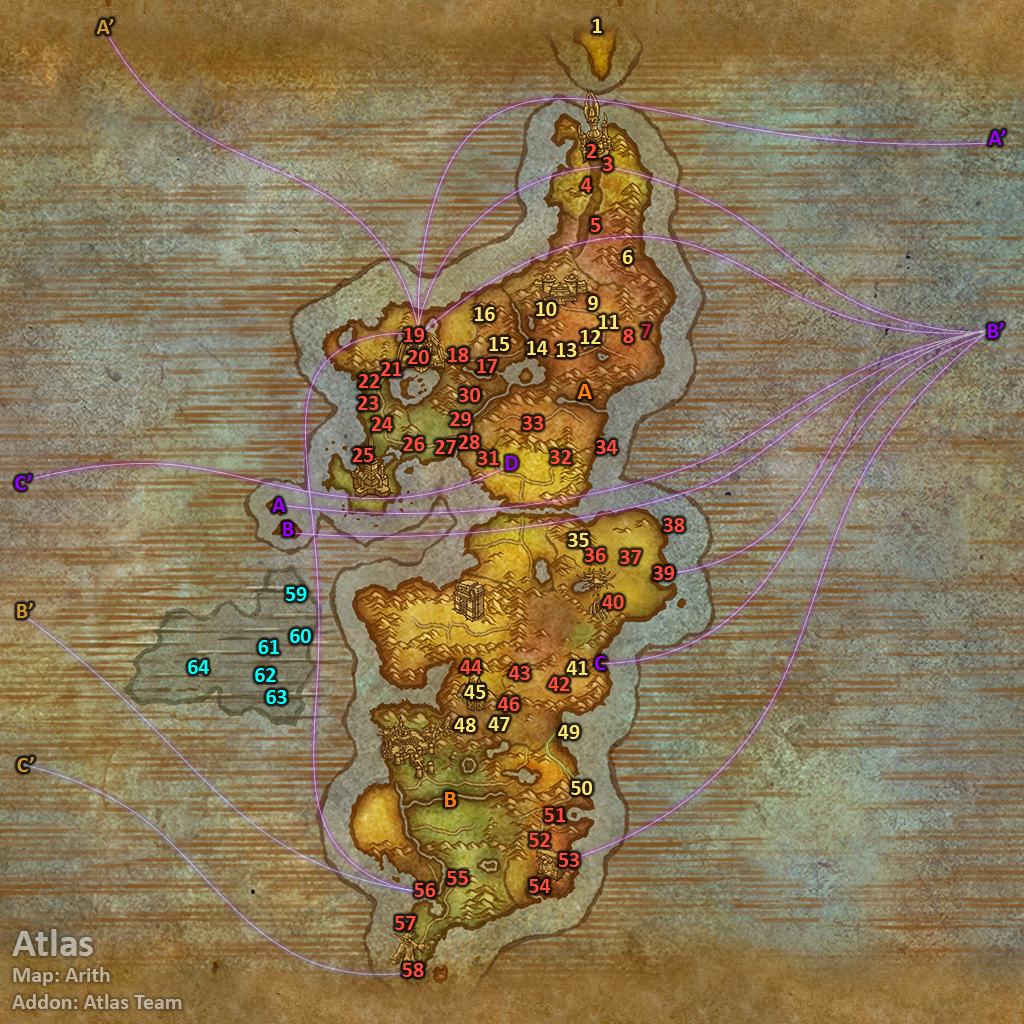
<style>
.page{position:relative;width:1024px;height:1024px}
.page>*{position:absolute;margin:0}
.t1{font:22px "Calibri-Bold";color:#cc9933}
.t2{font:22px "Calibri-Bold";letter-spacing:-0.005em;color:#fee570}
.t3{font:22px "Calibri-Bold";color:#9900ff}
.t4{font:22px "Calibri-Bold";letter-spacing:-0.005em;color:#ff4c3c}
.t5{font:22px "Calibri-Bold";letter-spacing:-0.005em;color:#c41f3b}
.t6{font:24px "Calibri-Bold";color:#ff7d0a}
.t7{font:22px "Calibri-Bold";letter-spacing:-0.005em;color:#00ffff}
.t8{font:22px "Calibri-Bold";color:#beb09c}
.t9{font:40px "Calibri-Bold";color:#beb09c}
</style>
<div class="page">
<p class="t1" style="left:96px;top:19px;width:18px;height:15px">A’</p>
<p class="t2" style="left:593px;top:19px;width:9px;height:14px">1</p>
<p class="t3" style="left:988px;top:130px;width:18px;height:15px">A’</p>
<p class="t4" style="left:587px;top:144px;width:10px;height:14px">2</p>
<p class="t4" style="left:603px;top:157px;width:10px;height:14px">3</p>
<p class="t4" style="left:581px;top:178px;width:11px;height:14px">4</p>
<p class="t4" style="left:591px;top:218px;width:10px;height:14px">5</p>
<p class="t2" style="left:623px;top:250px;width:10px;height:14px">6</p>
<p class="t2" style="left:536px;top:302px;width:21px;height:14px">10</p>
<p class="t2" style="left:588px;top:296px;width:10px;height:14px">9</p>
<p class="t2" style="left:474px;top:307px;width:21px;height:14px">16</p>
<p class="t2" style="left:599px;top:315px;width:20px;height:14px">11</p>
<p class="t4" style="left:404px;top:328px;width:20px;height:14px">19</p>
<p class="t4" style="left:623px;top:329px;width:11px;height:14px">8</p>
<p class="t5" style="left:641px;top:324px;width:10px;height:14px">7</p>
<p class="t3" style="left:988px;top:323px;width:16px;height:15px">B’</p>
<p class="t2" style="left:489px;top:337px;width:21px;height:14px">15</p>
<p class="t2" style="left:527px;top:341px;width:21px;height:14px">14</p>
<p class="t2" style="left:580px;top:330px;width:21px;height:14px">12</p>
<p class="t4" style="left:408px;top:350px;width:21px;height:14px">20</p>
<p class="t4" style="left:448px;top:348px;width:21px;height:14px">18</p>
<p class="t2" style="left:556px;top:343px;width:21px;height:14px">13</p>
<p class="t4" style="left:381px;top:362px;width:21px;height:14px">21</p>
<p class="t4" style="left:477px;top:359px;width:20px;height:14px">17</p>
<p class="t4" style="left:359px;top:374px;width:21px;height:14px">22</p>
<p class="t4" style="left:459px;top:388px;width:21px;height:14px">30</p>
<p class="t6" style="left:577px;top:384px;width:15px;height:15px">A</p>
<p class="t4" style="left:358px;top:396px;width:21px;height:14px">23</p>
<p class="t4" style="left:450px;top:412px;width:21px;height:14px">29</p>
<p class="t4" style="left:371px;top:417px;width:22px;height:14px">24</p>
<p class="t4" style="left:522px;top:416px;width:22px;height:14px">33</p>
<p class="t4" style="left:403px;top:437px;width:22px;height:14px">26</p>
<p class="t4" style="left:459px;top:435px;width:21px;height:14px">28</p>
<p class="t4" style="left:353px;top:448px;width:21px;height:14px">25</p>
<p class="t4" style="left:435px;top:440px;width:21px;height:14px">27</p>
<p class="t4" style="left:596px;top:440px;width:22px;height:14px">34</p>
<p class="t4" style="left:478px;top:451px;width:21px;height:14px">31</p>
<p class="t3" style="left:506px;top:456px;width:12px;height:14px">D</p>
<p class="t4" style="left:550px;top:450px;width:21px;height:14px">32</p>
<p class="t3" style="left:15px;top:475px;width:17px;height:15px">C’</p>
<p class="t3" style="left:272px;top:498px;width:14px;height:14px">A</p>
<p class="t4" style="left:663px;top:518px;width:22px;height:14px">38</p>
<p class="t3" style="left:283px;top:522px;width:11px;height:14px">B</p>
<p class="t2" style="left:568px;top:533px;width:21px;height:14px">35</p>
<p class="t4" style="left:584px;top:548px;width:22px;height:14px">36</p>
<p class="t4" style="left:620px;top:550px;width:21px;height:14px">37</p>
<p class="t4" style="left:653px;top:566px;width:21px;height:14px">39</p>
<p class="t7" style="left:286px;top:587px;width:21px;height:14px">59</p>
<p class="t1" style="left:17px;top:603px;width:16px;height:15px">B’</p>
<p class="t4" style="left:602px;top:595px;width:22px;height:14px">40</p>
<p class="t7" style="left:290px;top:629px;width:21px;height:14px">60</p>
<p class="t7" style="left:258px;top:640px;width:21px;height:14px">61</p>
<p class="t7" style="left:188px;top:660px;width:21px;height:14px">64</p>
<p class="t4" style="left:460px;top:660px;width:22px;height:14px">44</p>
<p class="t2" style="left:566px;top:661px;width:22px;height:14px">41</p>
<p class="t3" style="left:595px;top:656px;width:11px;height:14px">C</p>
<p class="t7" style="left:255px;top:668px;width:21px;height:14px">62</p>
<p class="t4" style="left:509px;top:666px;width:21px;height:14px">43</p>
<p class="t4" style="left:548px;top:677px;width:22px;height:14px">42</p>
<p class="t2" style="left:464px;top:685px;width:22px;height:14px">45</p>
<p class="t7" style="left:266px;top:690px;width:21px;height:14px">63</p>
<p class="t4" style="left:498px;top:697px;width:22px;height:14px">46</p>
<p class="t2" style="left:454px;top:718px;width:22px;height:14px">48</p>
<p class="t2" style="left:488px;top:717px;width:22px;height:14px">47</p>
<p class="t2" style="left:558px;top:725px;width:22px;height:14px">49</p>
<p class="t1" style="left:17px;top:757px;width:17px;height:15px">C’</p>
<p class="t2" style="left:571px;top:781px;width:21px;height:14px">50</p>
<p class="t6" style="left:445px;top:792px;width:12px;height:15px">B</p>
<p class="t4" style="left:544px;top:808px;width:22px;height:14px">51</p>
<p class="t4" style="left:529px;top:833px;width:21px;height:14px">52</p>
<p class="t4" style="left:559px;top:853px;width:21px;height:14px">53</p>
<p class="t4" style="left:447px;top:871px;width:21px;height:14px">55</p>
<p class="t4" style="left:529px;top:879px;width:22px;height:14px">54</p>
<p class="t4" style="left:414px;top:883px;width:22px;height:14px">56</p>
<p class="t4" style="left:395px;top:916px;width:21px;height:14px">57</p>
<p class="t8" style="left:12px;top:929px;width:170px;height:80px"><span class="t9">Atlas<br></span>Map: Arith<br>Addon: Atlas Team</p>
<p class="t4" style="left:402px;top:963px;width:22px;height:14px">58</p>
</div>
